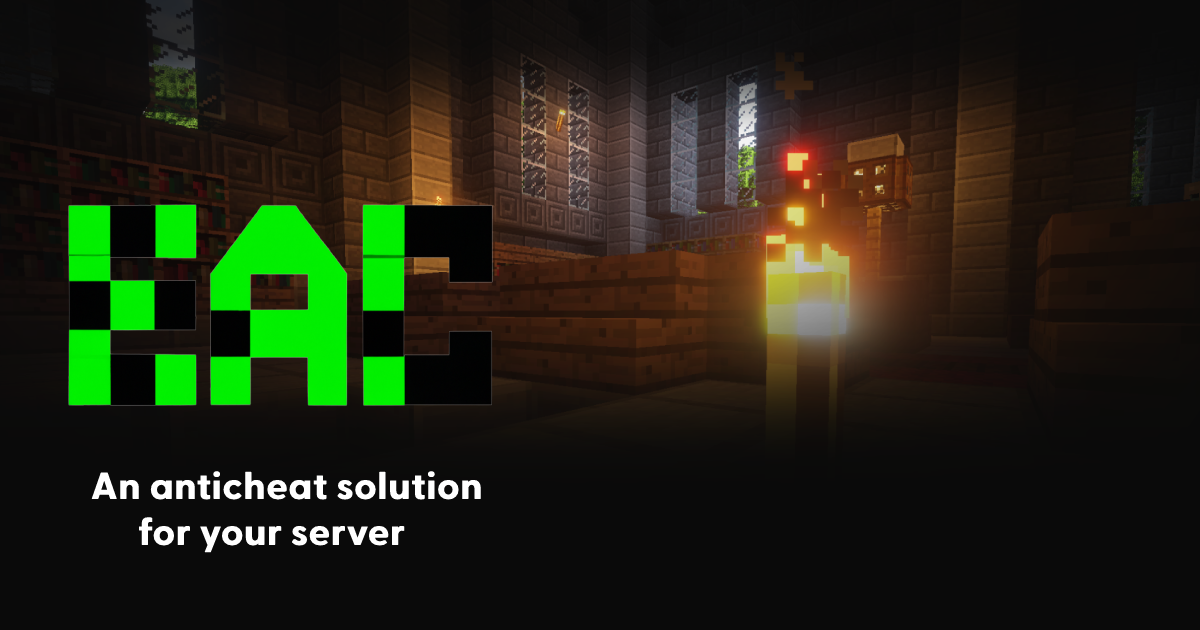
<style>
.page{position:relative;width:1200px;height:630px;background:#0a0a0a}
.page>*{position:absolute;margin:0}
.t1{font:38px "GreycliffCF-Bold";color:#ffffff;font-weight:bold}
</style>
<div class="page">
<p class="t1" style="left:91px;top:471px;width:390px;height:82px">An anticheat solution<br>     for your server</p>
</div>
